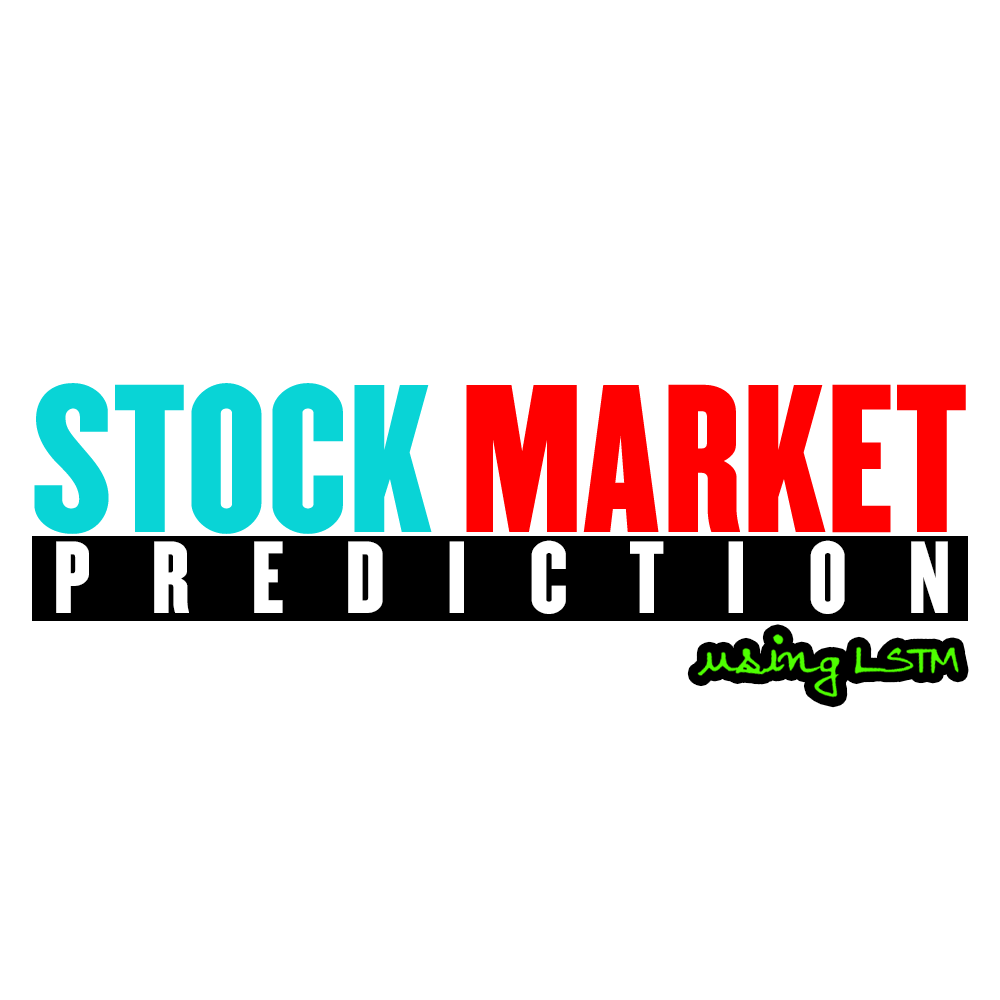
<style>
.page{position:relative;width:1000px;height:1000px;background:#ffffff}
.page>*{position:absolute;margin:0}
.t1{font:183.7px "Champion-HTF-Lightweight";color:#ff0000}
.t2{font:183.7px "Champion-HTF-Lightweight";color:#09d4d6}
.t3{font:89.3px "Champion-HTF-Lightweight";letter-spacing:0.68em;color:#ffffff}
</style>
<div class="page">
<p class="t1" style="left:34px;top:383px;width:932px;height:151px"><span class="t2">STOCK</span> MARKET</p>
<p class="t3" style="left:56px;top:540px;width:892px;height:74px">PREDICTION</p>
</div>
